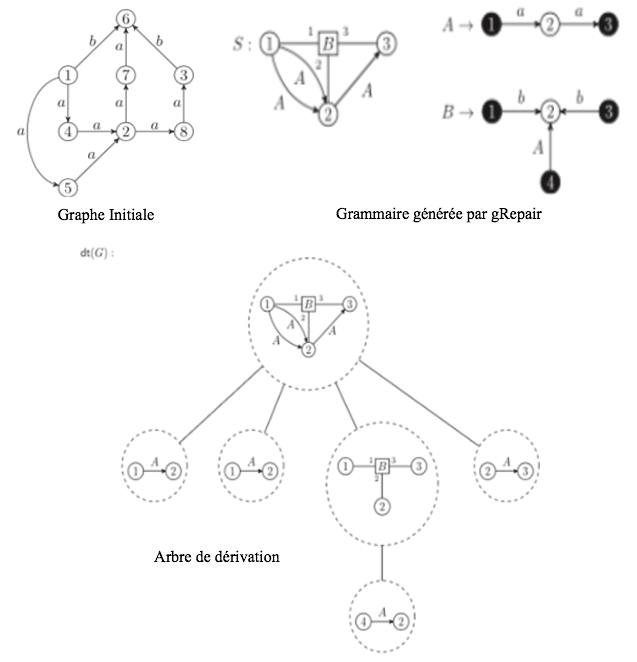
<style>
.page{position:relative;width:637px;height:662px;background:#ffffff}
.page>*{position:absolute;margin:0}
.t1{font:16px "TimesNewRomanPSMT";color:#030303}
</style>
<div class="page">
<p class="t1" style="left:58px;top:208px;width:96px;height:16px">Graphe Initiale</p>
<p class="t1" style="left:336px;top:207px;width:206px;height:16px">Grammaire générée par gRepair</p>
<p class="t1" style="left:154px;top:550px;width:126px;height:13px">Arbre de dérivation</p>
</div>
